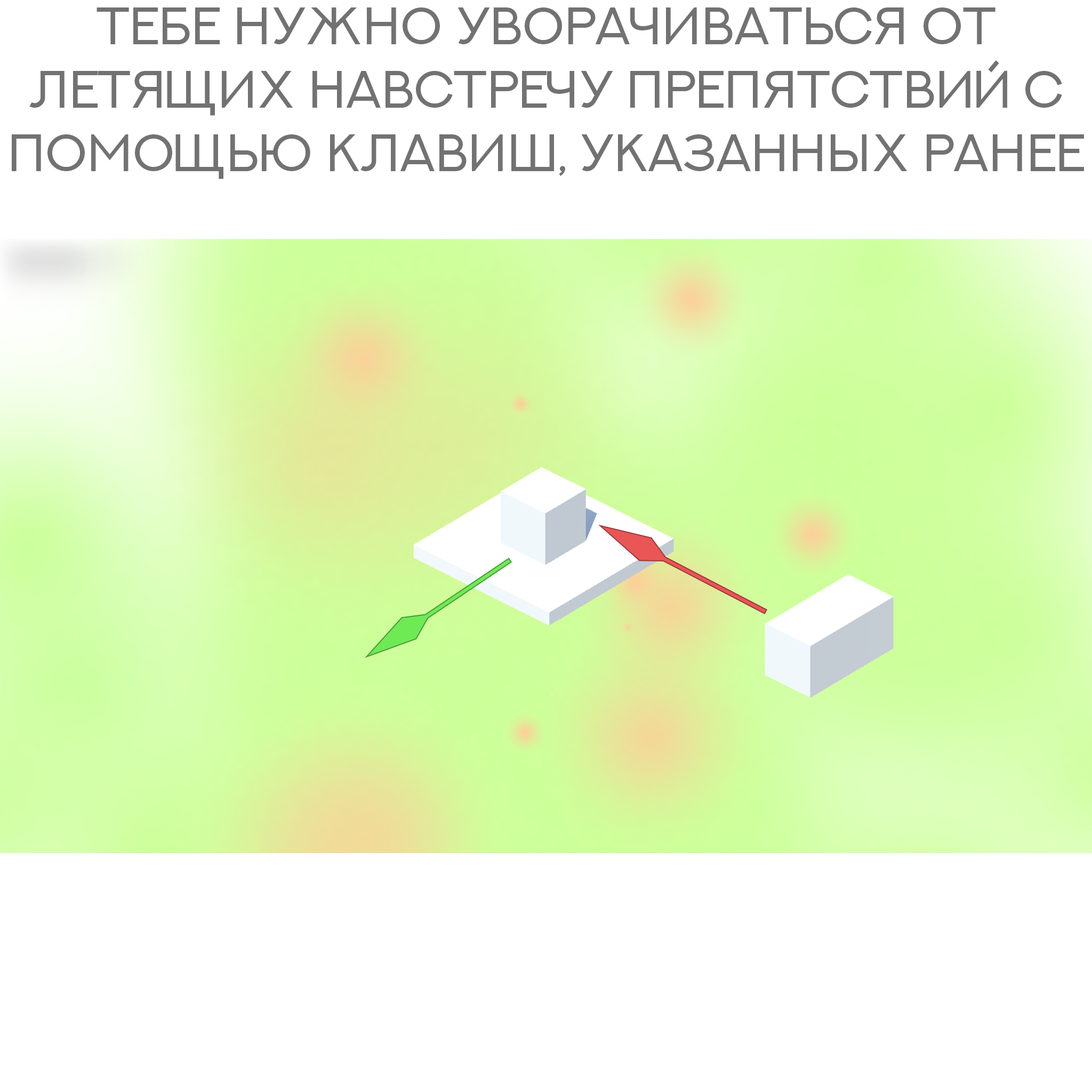
<style>
.page{position:relative;width:1092px;height:1092px;background:#ffffff}
.page>*{position:absolute;margin:0}
.t1{font:52.8px "NEXTART-Regular";color:#727272}
</style>
<div class="page">
<p class="t1" style="left:12px;top:7px;width:1072px;height:172px;text-align:center">тебе нужно уворачиваться от летящих навстречу препятствий с помощью клавиш, указанных ранее</p>
</div>
